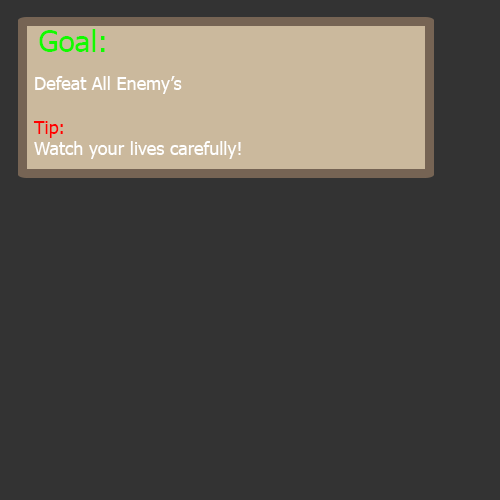
<style>
.page{position:relative;width:500px;height:500px;background:#333333}
.page>*{position:absolute;margin:0}
.t1{font:18px "Tahoma";color:#ffffff}
.t2{font:14px "Tahoma";color:#ffffff}
.t3{font:30px "Tahoma";color:#12fa00}
.t4{font:18px "Tahoma";color:#ff0000}
</style>
<div class="page">
<p class="t1" style="left:33px;top:29px;width:208px;height:130px"><span class="t2"> </span><span class="t3">Goal: <br><br></span>Defeat All Enemy’s <br><br><span class="t4">Tip:<br></span>Watch your lives carefully!</p>
</div>
